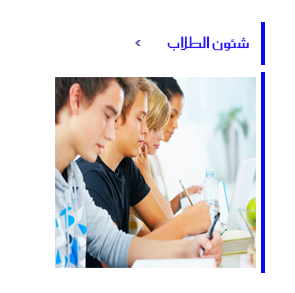
<style>
.page{position:relative;width:295px;height:293px;background:#ffffff}
.page>*{position:absolute;margin:0}
.t1{font:19px "SC_KHALID";color:#2b16f5}
</style>
<div class="page">
<p class="t1" style="left:167px;top:36px;width:82px;height:15px">شئون الطلاب</p>
</div>
